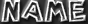
<style>
.page{position:relative;width:88px;height:24px}
.page>*{position:absolute;margin:0}
.t1{font:27.7px "Super-Mario-Bros.-Regular";color:#ffffff}
</style>
<div class="page">
<p class="t1" style="left:1px;top:0px;width:85px;height:23px">Name</p>
</div>
